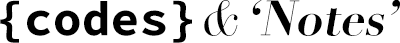
<style>
.page{position:relative;width:400px;height:43px;background:#ffffff}
.page>*{position:absolute;margin:0}
.t1{font:48.7px "SourceCodePro-Bold";color:#000000}
.t2{font:48.7px "Didot-Italic";color:#000000}
.t3{font:48.7px "Didot-Bold";color:#000000;font-style:italic}
</style>
<div class="page">
<p class="t1" style="left:0px;top:0px;width:400px;height:43px">{codes} <span class="t2">&amp; </span><span class="t3">‘Notes’</span></p>
</div>
